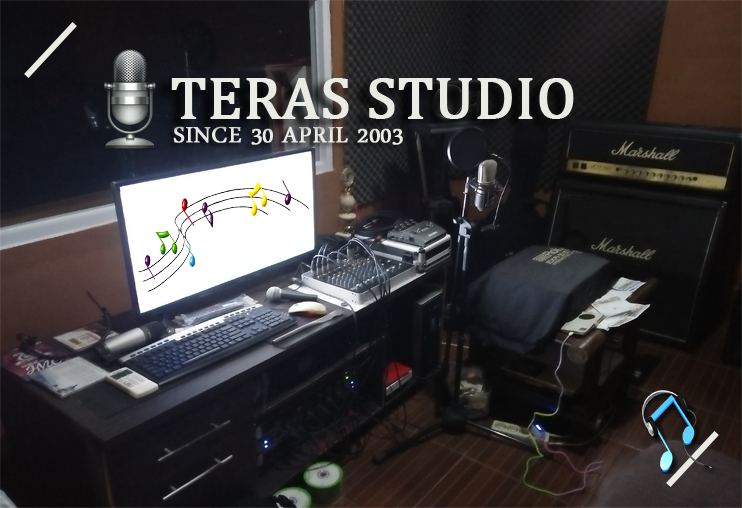
<style>
.page{position:relative;width:742px;height:508px}
.page>*{position:absolute;margin:0}
.t1{font:59.5px "Cambria";color:#eaebe5;text-transform:uppercase;font-weight:bold}
.t2{font:32.1px "DaunPenh";color:#eaebe5;text-transform:uppercase;font-weight:bold}
</style>
<div class="page">
<p class="t1" style="left:171px;top:78px;width:403px;height:41px">teras studio</p>
<p class="t2" style="left:173px;top:126px;width:230px;height:19px">since 30 april 2003</p>
</div>
